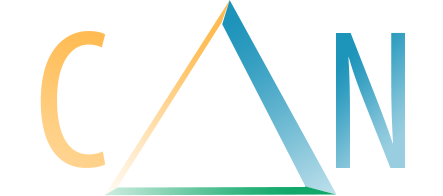
<style>
.page{position:relative;width:443px;height:196px;background:#ffffff}
.page>*{position:absolute;margin:0}
.t1{font:200px "MyriadPro-Cond"}
</style>
<div class="page">
<p class="t1" style="left:40px;top:31px;width:66px;height:137px">C</p>
<p class="t1" style="left:336px;top:32px;width:69px;height:136px">N</p>
</div>
